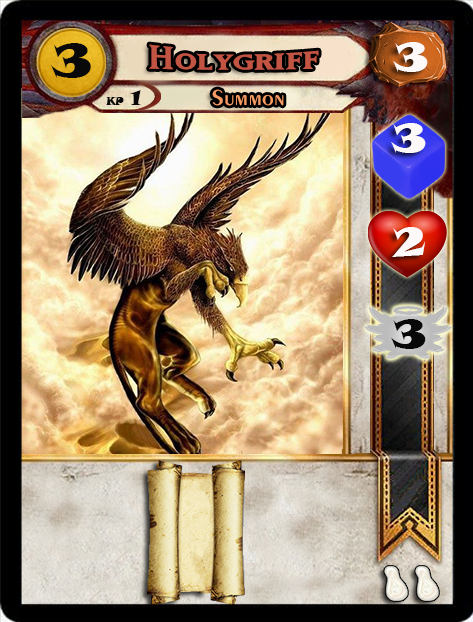
<style>
.page{position:relative;width:473px;height:622px}
.page>*{position:absolute;margin:0}
.t1{font:46.6px "SnapITC-Regular";color:#090909;scale:1.05 1}
.t2{font:40px "MatrixBoldSmallCaps";color:#c25443;scale:1.06 1}
.t3{font:40px "SnapITC-Regular";color:#fef9f9;scale:1.05 1}
.t4{font:22.7px "Exotic350BT-DemiBold";color:#f89c64;scale:1.06 1}
.t5{font:20.5px "SnapITC-Regular";color:#090909}
.t6{font:40px "SnapITC-Regular";color:#090909;scale:1.05 1}
</style>
<div class="page">
<p class="t1" style="left:51px;top:43px;width:40px;height:35px">3</p>
<p class="t2" style="left:149px;top:44px;width:170px;height:26px">Holygriff</p>
<p class="t3" style="left:393px;top:42px;width:35px;height:30px">3</p>
<p class="t4" style="left:212px;top:89px;width:72px;height:17px">Summon</p>
<p class="t5" style="left:130px;top:90px;width:11px;height:15px">1</p>
<p class="t3" style="left:391px;top:123px;width:35px;height:30px">3</p>
<p class="t3" style="left:392px;top:227px;width:34px;height:30px">2</p>
<p class="t6" style="left:391px;top:319px;width:35px;height:30px">3</p>
</div>
